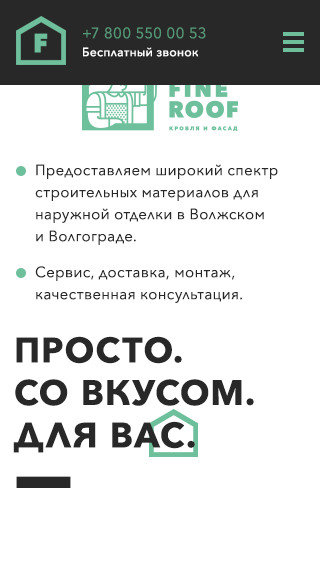
<style>
.page{position:relative;width:320px;height:569px;background:#ffffff}
.page>*{position:absolute;margin:0}
.t1{font:15px "AvenirNext-Regular";letter-spacing:0.025em;color:#559777}
.t2{font:12px "AvenirNext-Medium";letter-spacing:0.025em;color:#ffffff}
.t3{font:15px/22px "AvenirNext-Regular";letter-spacing:0.025em;color:#272727}
.t4{font:35px/42.5px "AvenirNext-Bold";letter-spacing:0.05em;color:#282828;text-transform:uppercase}
</style>
<div class="page">
<p class="t1" style="left:83px;top:27px;width:123px;height:12px">+7 800 550 00 53</p>
<p class="t2" style="left:83px;top:47px;width:116px;height:10px">Бесплатный звонок</p>
<p class="t3" style="left:35px;top:164px;width:243px;height:81px">Предоставляем широкий спектр <br>строительных материалов для <br>наружной отделки в Волжском <br>и Волгограде.</p>
<p class="t3" style="left:35px;top:266px;width:207px;height:37px">Сервис, доставка, монтаж,<br>качественная консультация.</p>
<p class="t4" style="left:13px;top:336px;width:241px;height:117px">Просто.<br>Со вкусом.<br>Для вас.</p>
</div>
